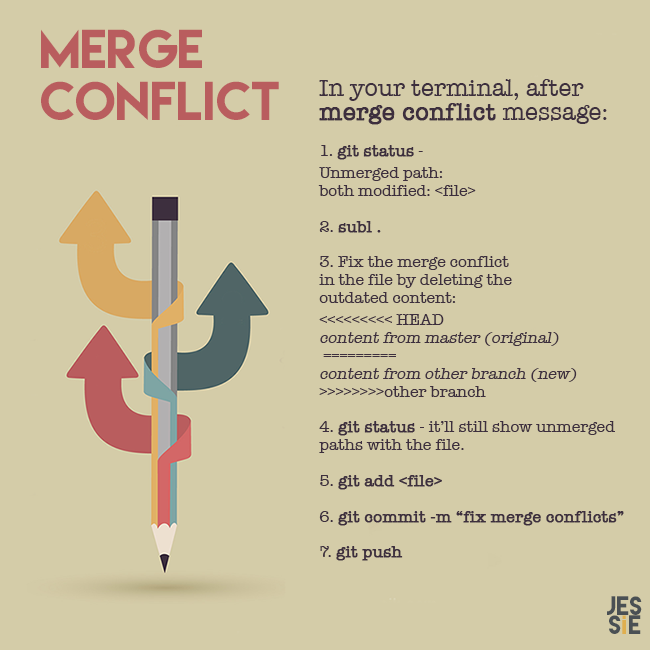
<style>
.page{position:relative;width:650px;height:650px;background:#d4cca8}
.page>*{position:absolute;margin:0}
.t1{font:48.7px/52.8px "LemonMilk";color:#b95d5e}
.t2{font:16.2px/17.9px "AmericanTypewriter";color:#3d2f3e}
.t3{font:24.4px/24.4px "AmericanTypewriter";color:#3d2f3e}
.t4{font:24.4px/24.4px "AmericanTypewriter";color:#3d2f3e;font-weight:bold}
.t5{font:16.2px/17.9px "AmericanTypewriter";color:#3d2f3e;font-weight:bold}
.t6{font:16.2px/21.9px "AmericanTypewriter";color:#3d2f3e}
.t7{font:16.2px/17.9px "AmericanTypewriter";color:#3d2f3e;font-style:italic}
.t8{font:23.7px/19.7px "LemonMilk";color:#4a5054}
.t9{font:23.7px/19.7px "PoplarStd";color:#dfaf4f}
</style>
<div class="page">
<p class="t1" style="left:41px;top:29px;width:238px;height:91px">merge<br>conflict</p>
<p class="t2" style="left:318px;top:79px;width:306px;height:482px"><span class="t3">In your terminal, after<br></span><span class="t4">merge conflict </span><span class="t3">message:<br></span><br>1. <span class="t5">git status</span> - <br><span class="t6">Unmerged path: <br></span>both modified: &lt;file&gt;<br><br>2. <span class="t5">subl . <br></span><br>3. Fix the merge conflict <br>in the file by deleting the <br>outdated content:<br><span class="t6">&lt;&lt;&lt;&lt;&lt;&lt;&lt;&lt;&lt; HEAD<br></span><span class="t7">content from master (original)<br></span> ========= <br><span class="t7">content from other branch (new)<br></span>&gt;&gt;&gt;&gt;&gt;&gt;&gt;&gt;other branch<br><br>4. <span class="t5">git status </span>- it’ll still show unmerged paths with the file. <br><br>5. <span class="t5">git add &lt;file&gt;<br><br></span>6. <span class="t5">git commit -m “fix merge conflicts”<br><br></span>7. <span class="t5">git push</span></p>
<p class="t8" style="left:607px;top:596px;width:35px;height:38px;text-align:center">jes<br>s<span class="t9">i </span>e</p>
</div>
